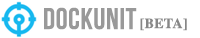
<style>
.page{position:relative;width:200px;height:38px;background:#ffffff}
.page>*{position:absolute;margin:0}
.t1{font:30px "BebasNeue";letter-spacing:0.02em;color:#999999}
.t2{font:14px "Times-Bold";letter-spacing:0.02em;color:#878787}
</style>
<div class="page">
<p class="t1" style="left:44px;top:7px;width:93px;height:23px">DOCKUNIT</p>
<p class="t2" style="left:140px;top:18px;width:47px;height:13px">[BETA]</p>
</div>
